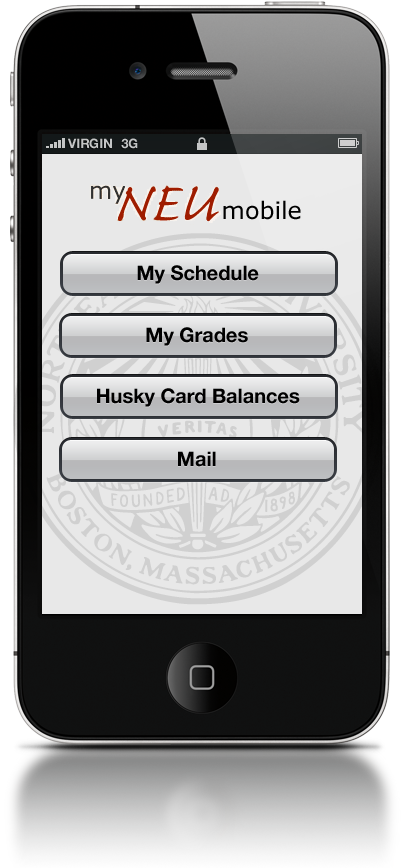
<style>
.page{position:relative;width:403px;height:868px}
.page>*{position:absolute;margin:0}
.t1{font:13px "HelveticaNeue-Bold";color:#c4c5c6;text-transform:uppercase}
.t2{font:24px "Verdana";color:#000000}
.t3{font:20px "HelveticaNeue-Bold";color:#000000}
</style>
<div class="page">
<p class="t1" style="left:68px;top:138px;width:44px;height:11px">VIRGIN</p>
<p class="t1" style="left:121px;top:138px;width:17px;height:11px">3G</p>
<p class="t2" style="left:223px;top:200px;width:78px;height:20px">mobile</p>
<p class="t3" style="left:137px;top:265px;width:122px;height:19px">My Schedule</p>
<p class="t3" style="left:146px;top:327px;width:102px;height:19px">My Grades</p>
<p class="t3" style="left:97px;top:388px;width:203px;height:19px">Husky Card Balances</p>
<p class="t3" style="left:178px;top:451px;width:38px;height:16px">Mail</p>
</div>
